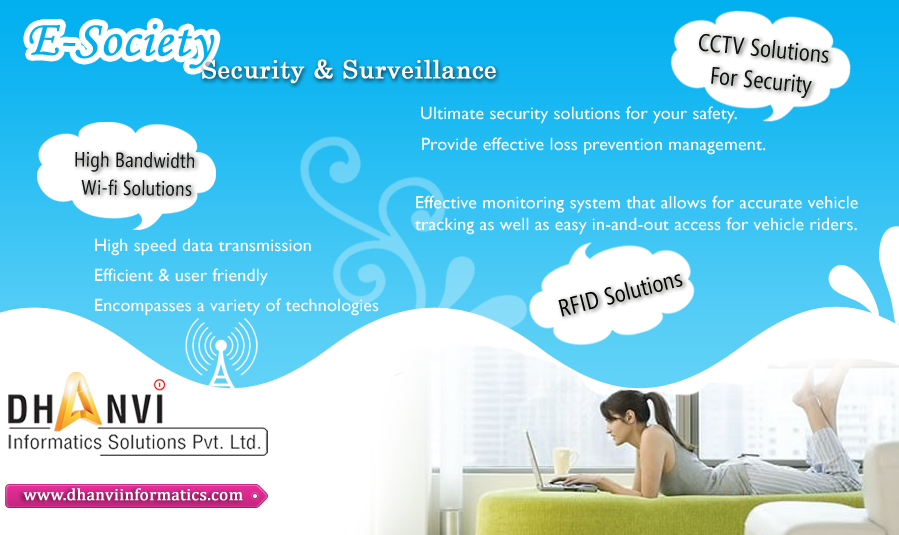
<style>
.page{position:relative;width:899px;height:535px;background:#ffffff}
.page>*{position:absolute;margin:0}
.t1{font:50px "MonotypeCorsiva";letter-spacing:0.01em;color:#00aff0;font-weight:bold}
.t2{font:24px "SegoeCondensed";letter-spacing:0.01em;color:#0b110f}
.t3{font:25px "Century";letter-spacing:0.01em;color:#ffffff;font-weight:bold}
.t4{font:18px "GillSansMT";letter-spacing:0.01em;color:#ffffff}
.t5{font:20.8px "SegoeCondensed";letter-spacing:0.01em;color:#101415}
.t6{font:18px/30px "GillSansMT";letter-spacing:0.01em;color:#ffffff}
.t7{font:24px "SegoeCondensed";letter-spacing:0.01em;color:#010101}
.t8{font:16.7px "CambriaMath";letter-spacing:0.01em;color:#ffffff;font-weight:bold}
</style>
<div class="page">
<p class="t1" style="left:29px;top:23px;width:186px;height:46px;rotate:1deg">E-Society</p>
<p class="t2" style="left:699px;top:34px;width:130px;height:64px;text-align:center;rotate:6deg">CCTV Solutions<br>For Security</p>
<p class="t3" style="left:202px;top:59px;width:294px;height:25px">Security &amp; Surveillance</p>
<p class="t4" style="left:421px;top:106px;width:316px;height:18px">Ultimate security solutions for your safety.</p>
<p class="t4" style="left:422px;top:137px;width:344px;height:18px">Provide effective loss prevention management.</p>
<p class="t5" style="left:75px;top:151px;width:120px;height:45px;text-align:center;rotate:1deg">High Bandwidth <br>Wi-fi Solutions</p>
<p class="t4" style="left:415px;top:195px;width:443px;height:40px">Effective monitoring system that allows for accurate vehicle tracking as well as easy in-and-out access for vehicle riders.</p>
<p class="t6" style="left:95px;top:238px;width:284px;height:78px">High speed data transmission<br>Efficient &amp; user friendly<br>Encompasses a variety of technologies</p>
<p class="t7" style="left:558px;top:274px;width:125px;height:43px;rotate:-14deg">RFID Solutions</p>
<p class="t8" style="left:23px;top:488px;width:220px;height:13px">www.dhanviinformatics.com</p>
</div>
